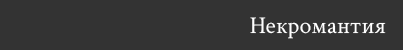
<style>
.page{position:relative;width:403px;height:50px;background:#333333}
.page>*{position:absolute;margin:0}
.t1{font:24px "CrimsonText-Regular";color:#ffffff}
</style>
<div class="page">
<p class="t1" style="left:250px;top:17px;width:136px;height:22px">Некромантия</p>
</div>
